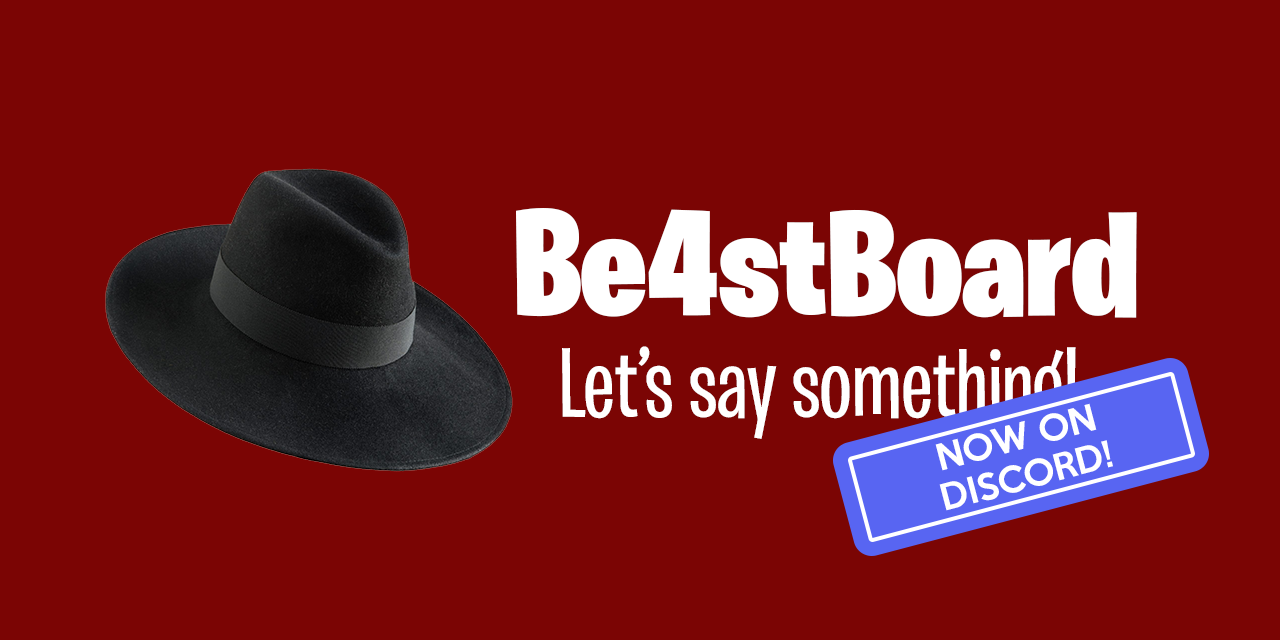
<style>
.page{position:relative;width:1280px;height:640px;background:#7b0504}
.page>*{position:absolute;margin:0}
.t1{font:150px "BurbankBigCondensed-Black";color:#ffffff}
.t2{font:100px "BurbankBigCondensed-Medium";color:#ffffff}
.t3{font:33.4px "KeepCalm-Medium";color:#ffffff}
</style>
<div class="page">
<p class="t1" style="left:516px;top:208px;width:621px;height:110px">Be4stBoard</p>
<p class="t2" style="left:562px;top:346px;width:515px;height:95px">Let’s say something!</p>
<p class="t3" style="left:935px;top:403px;width:178px;height:108px;rotate:-15deg">NOW ON DISCORD!</p>
</div>
